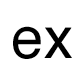
<style>
.page{position:relative;width:84px;height:84px;background:#ffffff}
.page>*{position:absolute;margin:0}
.t1{font:57.9px "Helvetica";color:#000000}
</style>
<div class="page">
<p class="t1" style="left:13px;top:26px;width:59px;height:33px">ex</p>
</div>
